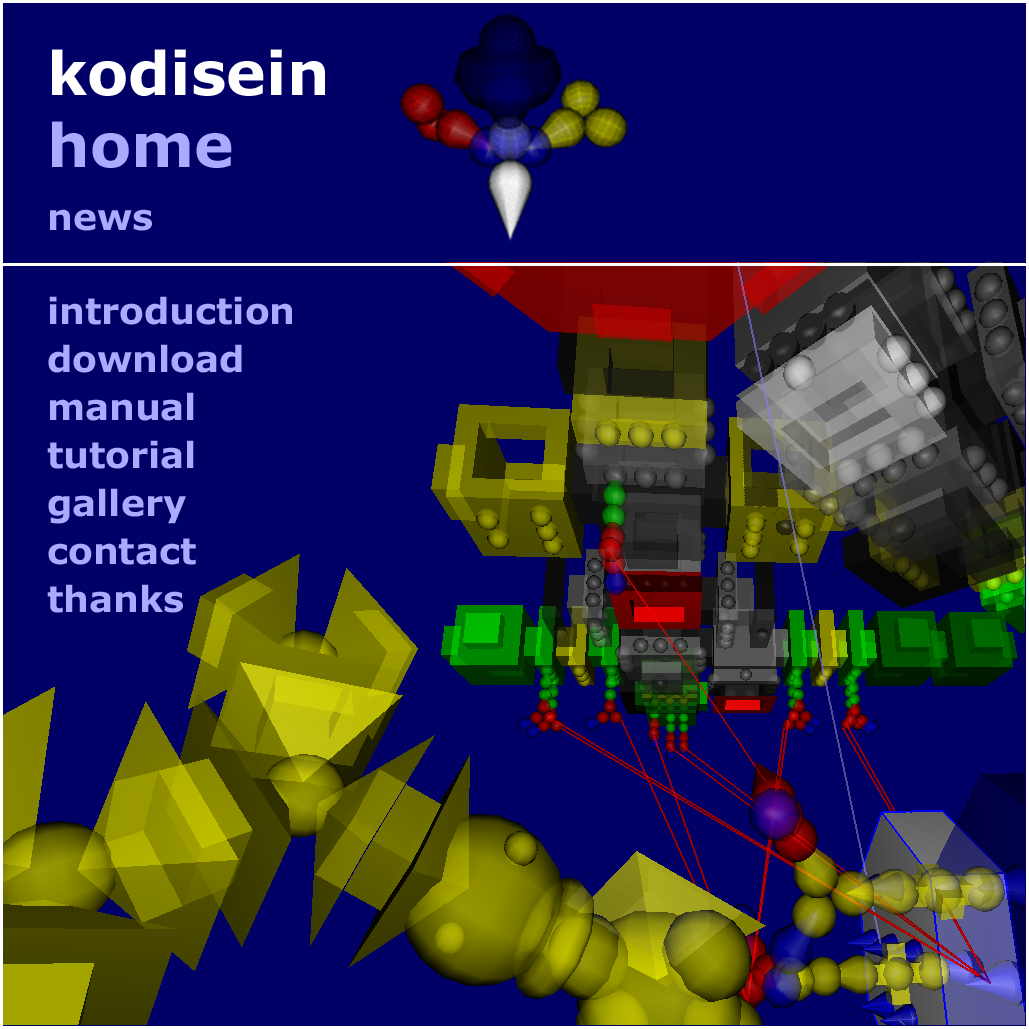
<style>
.page{position:relative;width:1029px;height:1029px;background:#000066}
.page>*{position:absolute;margin:0}
.t1{font:60px "Verdana-Bold";color:#ffffff}
.t2{font:60px "Verdana-Bold";color:#aaaaff}
.t3{font:36px "Verdana-Bold";color:#aaaaff}
.t4{font:36px/48px "Verdana-Bold";color:#aaaaff}
</style>
<div class="page">
<p class="t1" style="left:52px;top:49px;width:273px;height:47px">kodisein</p>
<p class="t2" style="left:52px;top:121px;width:180px;height:47px"><span class="t1"><br></span>home</p>
<p class="t3" style="left:50px;top:209px;width:102px;height:22px">news</p>
<p class="t4" style="left:47px;top:296px;width:245px;height:317px">introduction<br>download<br>manual<br>tutorial<br>gallery<br>contact<br>thanks</p>
</div>
